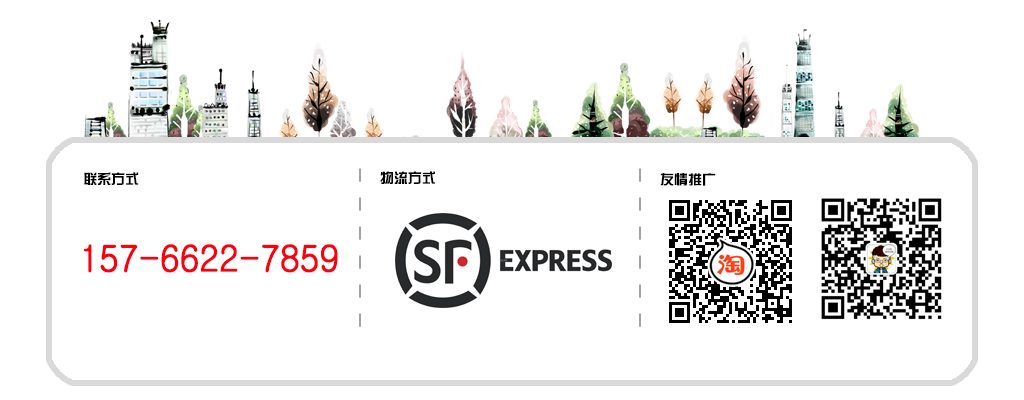
<style>
.page{position:relative;width:1024px;height:400px;background:#ffffff}
.page>*{position:absolute;margin:0}
.t1{font:14px "BDZYJT--GB1-0";color:#000000}
.t2{font:14px/21px "BDZYJT--GB1-0"}
.t3{font:36px "Gulim";letter-spacing:-0.025em;color:#fb010d;font-weight:bold;scale:0.95 1}
</style>
<div class="page">
<p class="t1" style="left:84px;top:172px;width:55px;height:13px">联系方式</p>
<p class="t2" style="left:359px;top:168px;width:2px;height:159px">|<br>|<br>|<br>|<br>|<br>|</p>
<p class="t1" style="left:380px;top:171px;width:55px;height:13px">物流方式</p>
<p class="t2" style="left:639px;top:168px;width:2px;height:159px">|<br>|<br>|<br>|<br>|<br>|</p>
<p class="t1" style="left:660px;top:173px;width:56px;height:13px">友情推广</p>
<p class="t3" style="left:83px;top:244px;width:255px;height:29px">157-6622-7859</p>
</div>
